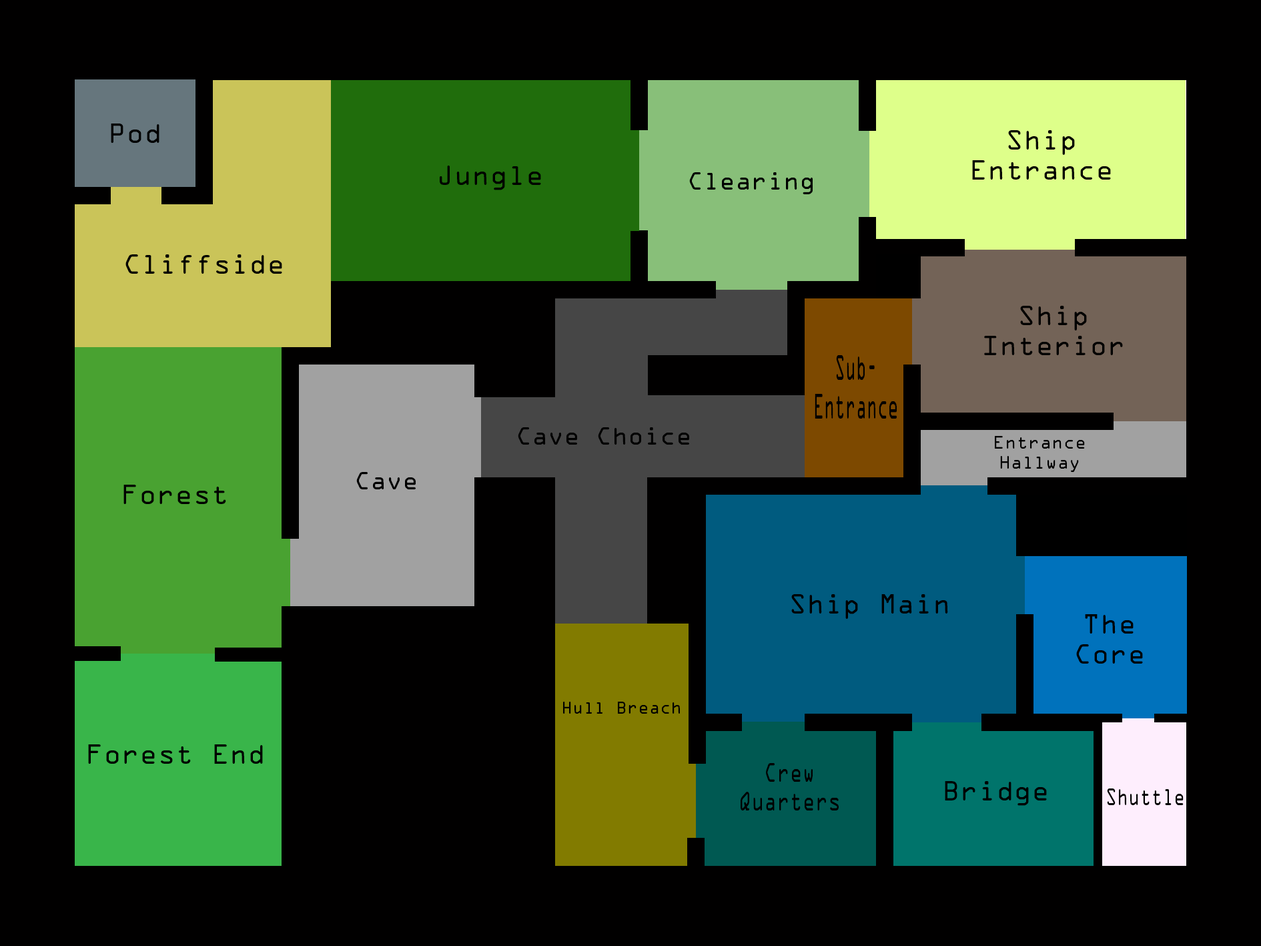
<style>
.page{position:relative;width:1261px;height:946px;background:#010000}
.page>*{position:absolute;margin:0}
.t1{font:25px "OCRAStd";color:#000000}
.t2{font:22.2px "OCRAStd";color:#000000}
.t3{font:32px "OCRAStd";color:#000000;scale:0.46 1}
.t4{font:16.6px "OCRAStd";color:#000000}
.t5{font:15.5px "OCRAStd";color:#000000}
.t6{font:24.1px "OCRAStd";color:#000000;scale:0.74 1}
.t7{font:21.6px "OCRAStd";color:#000000;scale:0.73 1}
</style>
<div class="page">
<p class="t1" style="left:111px;top:123px;width:48px;height:20px">Pod</p>
<p class="t1" style="left:972px;top:130px;width:139px;height:49px;text-align:center">Ship Entrance</p>
<p class="t1" style="left:440px;top:165px;width:101px;height:25px">Jungle</p>
<p class="t2" style="left:689px;top:172px;width:124px;height:22px">Clearing</p>
<p class="t1" style="left:125px;top:254px;width:157px;height:20px">Cliffside</p>
<p class="t1" style="left:984px;top:306px;width:139px;height:49px;text-align:center">Ship Interior</p>
<p class="t3" style="left:815px;top:355px;width:82px;height:63px;text-align:center">Sub-<br>Entrance</p>
<p class="t2" style="left:518px;top:427px;width:171px;height:17px">Cave Choice</p>
<p class="t4" style="left:995px;top:436px;width:90px;height:36px;text-align:center">Entrance Hallway</p>
<p class="t2" style="left:356px;top:472px;width:60px;height:17px">Cave</p>
<p class="t1" style="left:123px;top:484px;width:103px;height:20px">Forest</p>
<p class="t1" style="left:791px;top:594px;width:157px;height:25px">Ship Main</p>
<p class="t1" style="left:1076px;top:614px;width:67px;height:49px;text-align:center">The Core</p>
<p class="t5" style="left:563px;top:701px;width:117px;height:12px">Hull Breach</p>
<p class="t1" style="left:88px;top:744px;width:175px;height:19px">Forest End</p>
<p class="t6" style="left:741px;top:763px;width:98px;height:47px;text-align:center">Crew Quarters</p>
<p class="t1" style="left:945px;top:781px;width:102px;height:24px">Bridge</p>
<p class="t7" style="left:1107px;top:788px;width:77px;height:17px">Shuttle</p>
</div>
